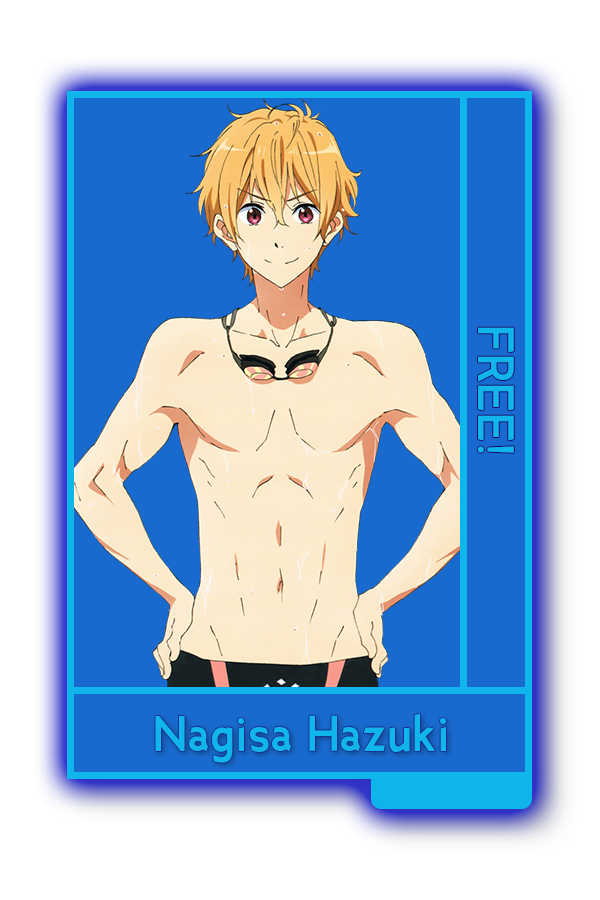
<style>
.page{position:relative;width:600px;height:900px;background:#196acf}
.page>*{position:absolute;margin:0}
.t1{font:47.8px "Ancillary-Bold";color:#0fb5eb}
.t2{font:46.7px "Ancillary-Bold";color:#0fb5eb}
</style>
<div class="page">
<p class="t1" style="left:477px;top:327px;width:37px;height:126px;rotate:90deg">FREE!</p>
<p class="t2" style="left:155px;top:713px;width:291px;height:50px">Nagisa Hazuki</p>
</div>
